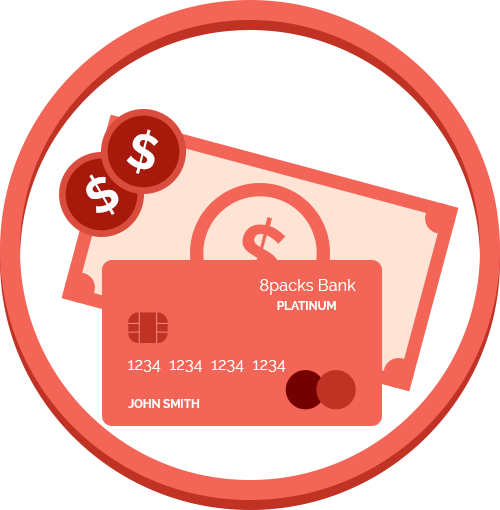
<style>
.page{position:relative;width:500px;height:510px;background:#ffffff}
.page>*{position:absolute;margin:0}
.t1{font:48px "Raleway-Bold";color:#ffffff}
.t2{font:80px "Raleway-Bold";color:#f36557}
.t3{font:16.3px "Raleway";color:#ffffff}
.t4{font:11.6px "Raleway-Bold";color:#ffffff}
</style>
<div class="page">
<p class="t1" style="left:126px;top:129px;width:33px;height:45px;rotate:15deg">$</p>
<p class="t1" style="left:86px;top:174px;width:33px;height:41px;rotate:-30deg">$</p>
<p class="t2" style="left:232px;top:217px;width:54px;height:74px;rotate:15deg">$</p>
<p class="t3" style="left:260px;top:279px;width:96px;height:16px">8packs Bank</p>
<p class="t4" style="left:277px;top:301px;width:59px;height:9px">PLATINUM</p>
<p class="t3" style="left:128px;top:360px;width:158px;height:12px">1234  1234  1234  1234</p>
<p class="t4" style="left:128px;top:399px;width:72px;height:9px">JOHN SMITH</p>
</div>
